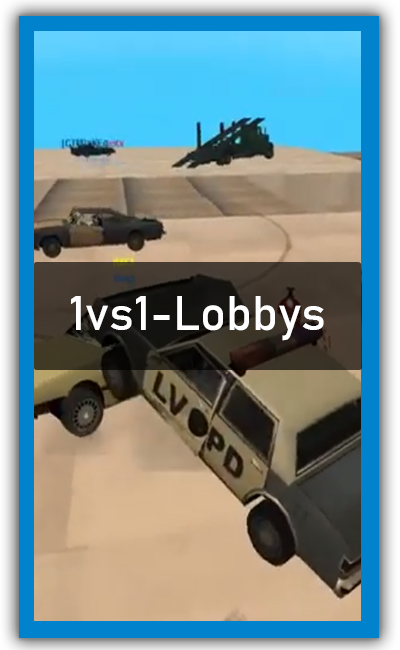
<style>
.page{position:relative;width:400px;height:650px}
.page>*{position:absolute;margin:0}
.t1{font:48px "Bahnschrift";color:#ffffff}
</style>
<div class="page">
<p class="t1" style="left:71px;top:296px;width:253px;height:45px">1vs1-Lobbys</p>
</div>
